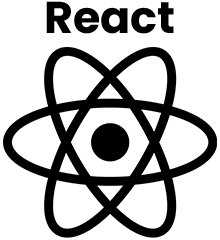
<style>
.page{position:relative;width:220px;height:240px;background:#ffffff}
.page>*{position:absolute;margin:0}
.t1{font:44.4px "Poppins-Bold";color:#000000}
</style>
<div class="page">
<p class="t1" style="left:46px;top:1px;width:128px;height:33px">React</p>
</div>
